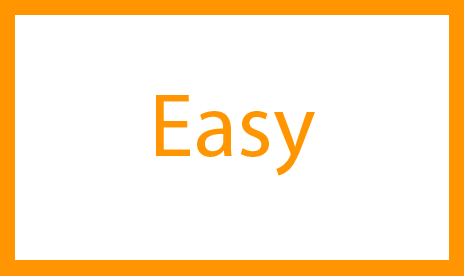
<style>
.page{position:relative;width:464px;height:276px;background:#ffffff}
.page>*{position:absolute;margin:0}
.t1{font:90px "MyriadPro-Regular";color:#ff9500}
</style>
<div class="page">
<p class="t1" style="left:156px;top:95px;width:159px;height:81px">Easy</p>
</div>
